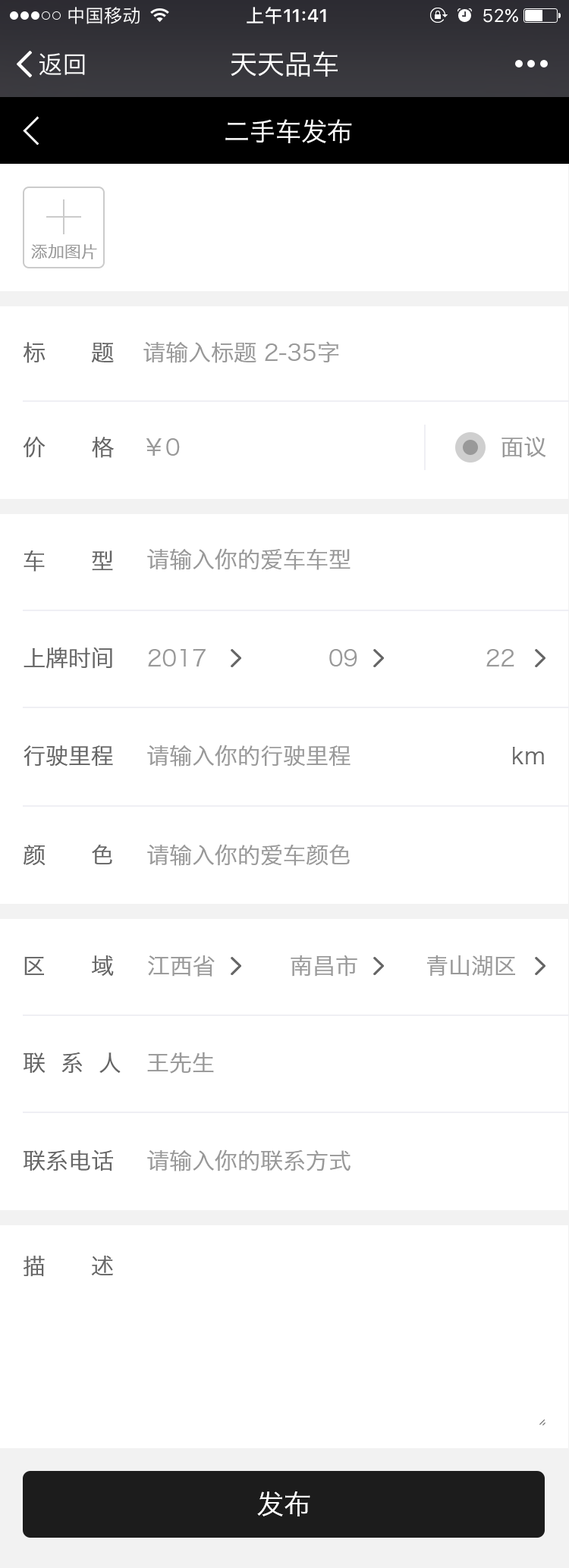
<style>
.page{position:relative;width:569px;height:1568px;background:#ffffff}
.page>*{position:absolute;margin:0}
.t1{font:27.3px "HiraginoSansGB-W3";color:#ffffff}
.t2{font:25.8px "HiraginoSansGB-W3";color:#ffffff}
.t3{font:16.7px "HiraginoSansGB-W3";color:#999999}
.t4{font:22.7px "HiraginoSansGB-W3";color:#666666;text-transform:uppercase}
.t5{font:22.7px "HiraginoSansGB-W3";color:#999999;text-transform:uppercase}
.t6{font:22.7px "HiraginoSansGB-W3";color:#666666}
.t7{font:27.3px "HiraginoSansGB-W3";color:#ffffff;text-transform:uppercase}
</style>
<div class="page">
<p class="t1" style="left:230px;top:52px;width:107px;height:25px">天天品车</p>
<p class="t2" style="left:225px;top:119px;width:127px;height:24px">二手车发布</p>
<p class="t3" style="left:31px;top:244px;width:66px;height:15px">添加图片</p>
<p class="t4" style="left:23px;top:342px;width:91px;height:21px">标      题</p>
<p class="t5" style="left:143px;top:341px;width:196px;height:22px">请输入标题 2-35字</p>
<p class="t4" style="left:23px;top:436px;width:91px;height:22px">价      格</p>
<p class="t5" style="left:501px;top:437px;width:45px;height:21px">面议</p>
<p class="t5" style="left:146px;top:438px;width:34px;height:18px">￥0</p>
<p class="t4" style="left:24px;top:550px;width:89px;height:22px">车      型</p>
<p class="t5" style="left:147px;top:548px;width:203px;height:22px">请输入你的爱车车型</p>
<p class="t4" style="left:24px;top:647px;width:88px;height:22px">上牌时间</p>
<p class="t5" style="left:148px;top:648px;width:57px;height:19px">2017</p>
<p class="t5" style="left:329px;top:649px;width:28px;height:17px">09</p>
<p class="t5" style="left:486px;top:649px;width:28px;height:18px">22</p>
<p class="t4" style="left:24px;top:745px;width:89px;height:22px">行驶里程</p>
<p class="t5" style="left:147px;top:745px;width:203px;height:22px">请输入你的行驶里程</p>
<p class="t6" style="left:513px;top:747px;width:31px;height:17px">km</p>
<p class="t4" style="left:24px;top:844px;width:88px;height:22px">颜      色</p>
<p class="t5" style="left:147px;top:844px;width:203px;height:22px">请输入你的爱车颜色</p>
<p class="t4" style="left:24px;top:955px;width:90px;height:21px">区      域</p>
<p class="t5" style="left:148px;top:955px;width:67px;height:22px">江西省</p>
<p class="t5" style="left:290px;top:955px;width:67px;height:22px">南昌市</p>
<p class="t5" style="left:427px;top:955px;width:88px;height:22px">青山湖区</p>
<p class="t4" style="left:24px;top:1052px;width:97px;height:21px">联  系  人</p>
<p class="t5" style="left:147px;top:1052px;width:67px;height:22px">王先生</p>
<p class="t4" style="left:24px;top:1149px;width:89px;height:22px">联系电话</p>
<p class="t5" style="left:147px;top:1149px;width:203px;height:22px">请输入你的联系方式</p>
<p class="t4" style="left:24px;top:1256px;width:89px;height:21px">描      述</p>
<p class="t7" style="left:257px;top:1491px;width:53px;height:25px">发布</p>
</div>
